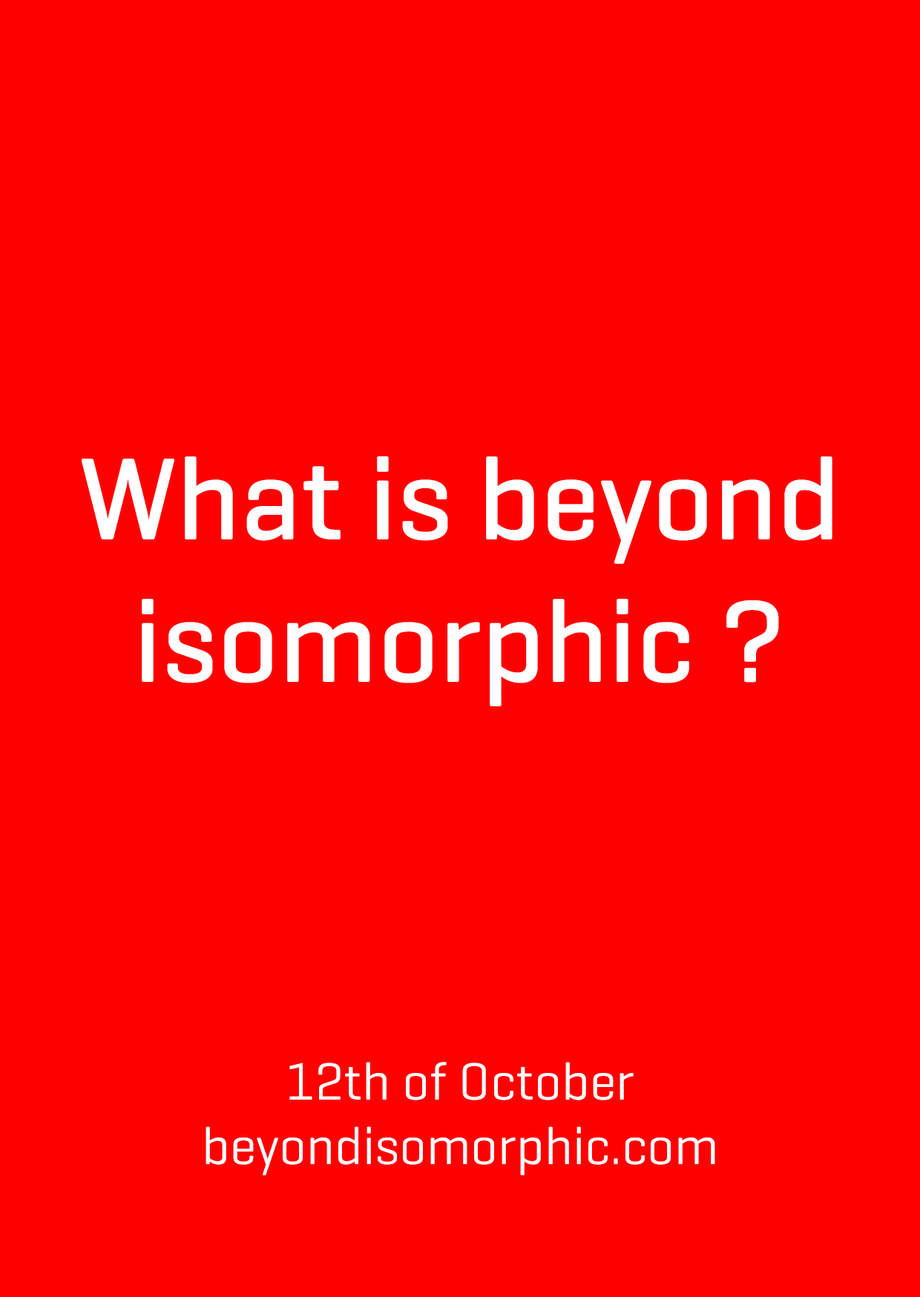
<style>
.page{position:relative;width:920px;height:1297px;background:#ff0000}
.page>*{position:absolute;margin:0}
.t1{font:118.7px "Geogrotesque-Medium";color:#ffffff}
.t2{font:118.7px "Geogrotesque-Medium";letter-spacing:-0.1em;color:#ffffff}
.t3{font:53.4px "Geogrotesque-Regular";color:#ffffff}
</style>
<div class="page">
<p class="t1" style="left:82px;top:456px;width:750px;height:250px;text-align:center"><span class="t2"><br><br><br><br><br></span>What is beyond<br>isomorphic ?</p>
<p class="t3" style="left:205px;top:1061px;width:510px;height:114px;text-align:center">12th of October<br>beyondisomorphic.com</p>
</div>
